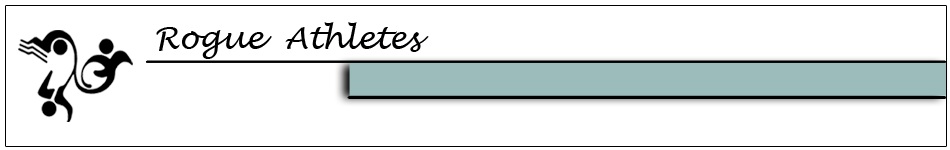
<style>
.page{position:relative;width:950px;height:150px;background:#ffffff}
.page>*{position:absolute;margin:0}
.t1{font:30.9px "LucidaHandwriting-Italic";color:#000000}
</style>
<div class="page">
<p class="t1" style="left:156px;top:22px;width:273px;height:37px">Rogue  Athletes</p>
</div>
